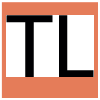
<style>
.page{position:relative;width:100px;height:100px;background:#ffffff}
.page>*{position:absolute;margin:0}
.t1{font:91.4px "MyriadPro-Regular";color:#000002}
</style>
<div class="page">
<p class="t1" style="left:6px;top:15px;width:88px;height:62px">TL</p>
</div>
